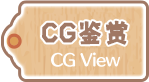
<style>
.page{position:relative;width:149px;height:82px}
.page>*{position:absolute;margin:0}
.t1{font:26.1px "shetumodengxiaofangti";color:#a07864;font-weight:bold}
</style>
<div class="page">
<p class="t1" style="left:42px;top:20px;width:86px;height:25px">CG鉴赏</p>
</div>
